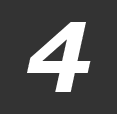
<style>
.page{position:relative;width:117px;height:114px;background:#333333}
.page>*{position:absolute;margin:0}
.t1{font:100px "BookmanOldStyle-BoldItalic";color:#ffffff}
</style>
<div class="page">
<p class="t1" style="left:27px;top:22px;width:64px;height:70px">4</p>
</div>
